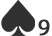
<style>
.page{position:relative;width:52px;height:36px;background:#ffffff}
.page>*{position:absolute;margin:0}
.t1{font:23.4px "MyriadPro-Regular";letter-spacing:-0.1em;color:#303030;font-weight:bold}
</style>
<div class="page">
<p class="t1" style="left:38px;top:19px;width:12px;height:17px">9</p>
</div>
